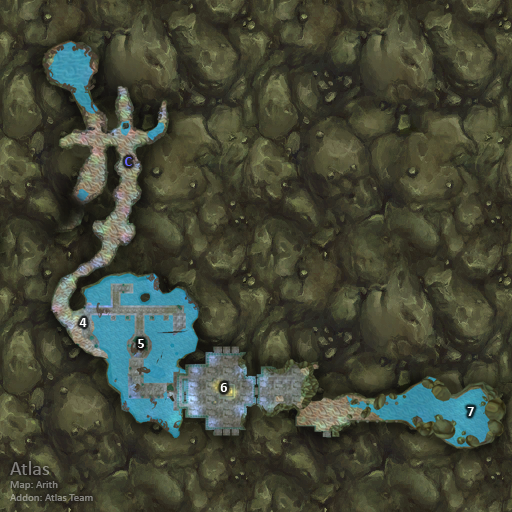
<style>
.page{position:relative;width:512px;height:512px}
.page>*{position:absolute;margin:0}
.t1{font:14px "Calibri-Bold";color:#6666ff}
.t2{font:14px "Calibri-Bold";color:#ffffff}
.t3{font:11px "Calibri";color:#85847f}
.t4{font:20px "Calibri";color:#85847f}
</style>
<div class="page">
<p class="t1" style="left:125px;top:157px;width:7px;height:9px">C</p>
<p class="t2" style="left:79px;top:318px;width:8px;height:9px">4</p>
<p class="t2" style="left:138px;top:339px;width:6px;height:9px">5</p>
<p class="t2" style="left:220px;top:383px;width:7px;height:9px">6</p>
<p class="t2" style="left:467px;top:407px;width:7px;height:9px">7</p>
<p class="t3" style="left:10px;top:461px;width:83px;height:40px"><span class="t4">Atlas<br></span>Map: Arith<br>Addon: Atlas Team</p>
</div>
